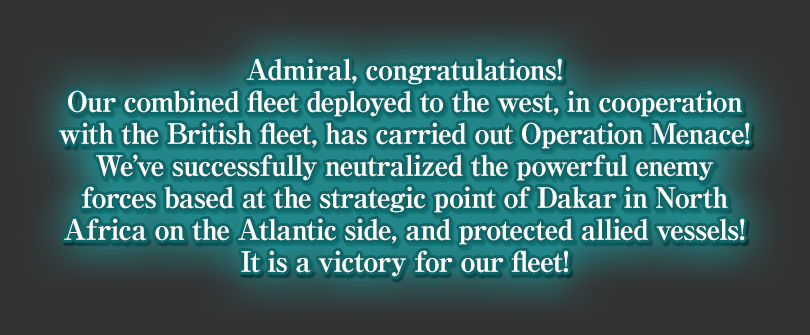
<style>
.page{position:relative;width:810px;height:335px;background:#333333}
.page>*{position:absolute;margin:0}
.t1{font:28px/32px "RyuminPro-ExBold";letter-spacing:-0.04em;color:#ffffff}
</style>
<div class="page">
<p class="t1" style="left:59px;top:58px;width:691px;height:219px;text-align:center">Admiral, congratulations!<br>Our combined fleet deployed to the west, in cooperation<br>with the British fleet, has carried out Operation Menace!<br>We’ve successfully neutralized the powerful enemy<br>forces based at the strategic point of Dakar in North<br>Africa on the Atlantic side, and protected allied vessels!<br>It is a victory for our fleet!</p>
</div>
